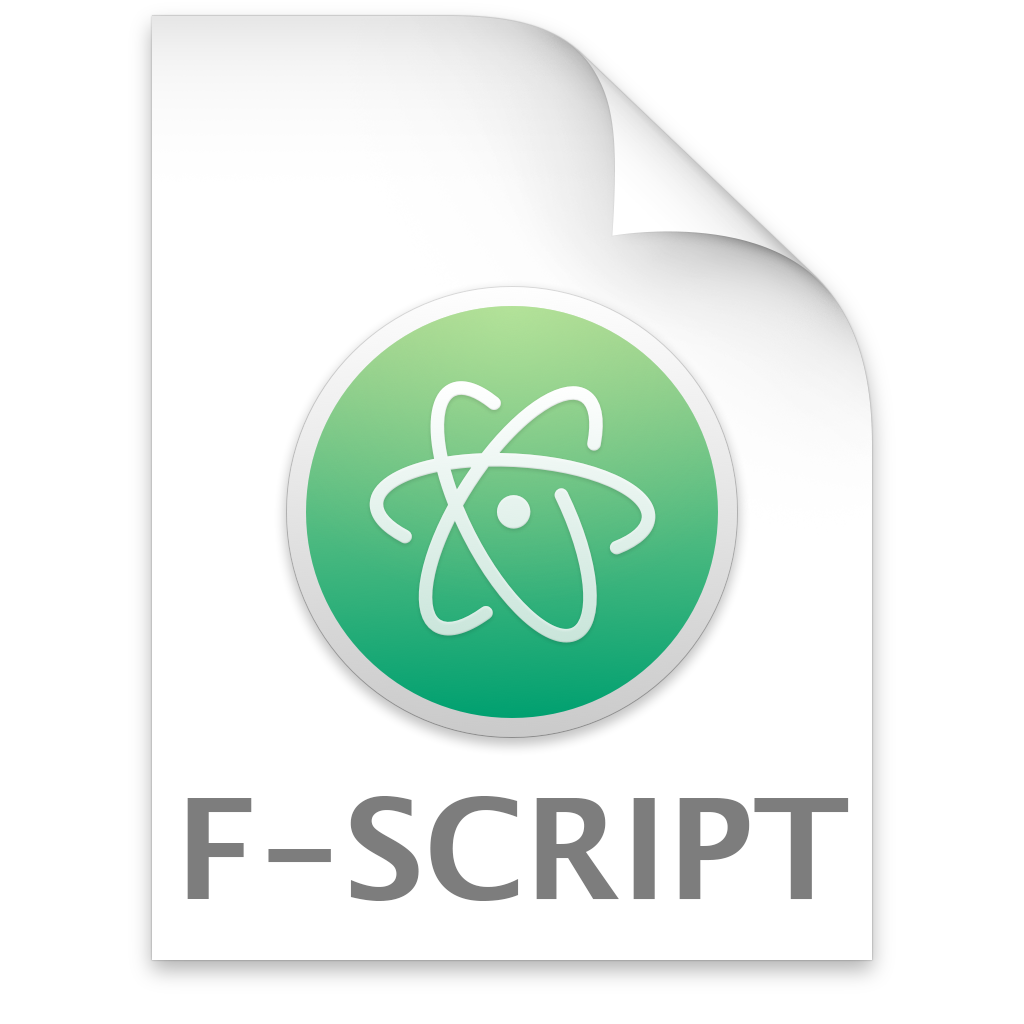
<style>
.page{position:relative;width:1024px;height:1024px;background:#ffffff}
.page>*{position:absolute;margin:0}
.t1{font:140px "LucidaGrande-Bold";color:#7d7d7d}
</style>
<div class="page">
<p class="t1" style="left:187px;top:796px;width:662px;height:105px">F-SCRIPT</p>
</div>
